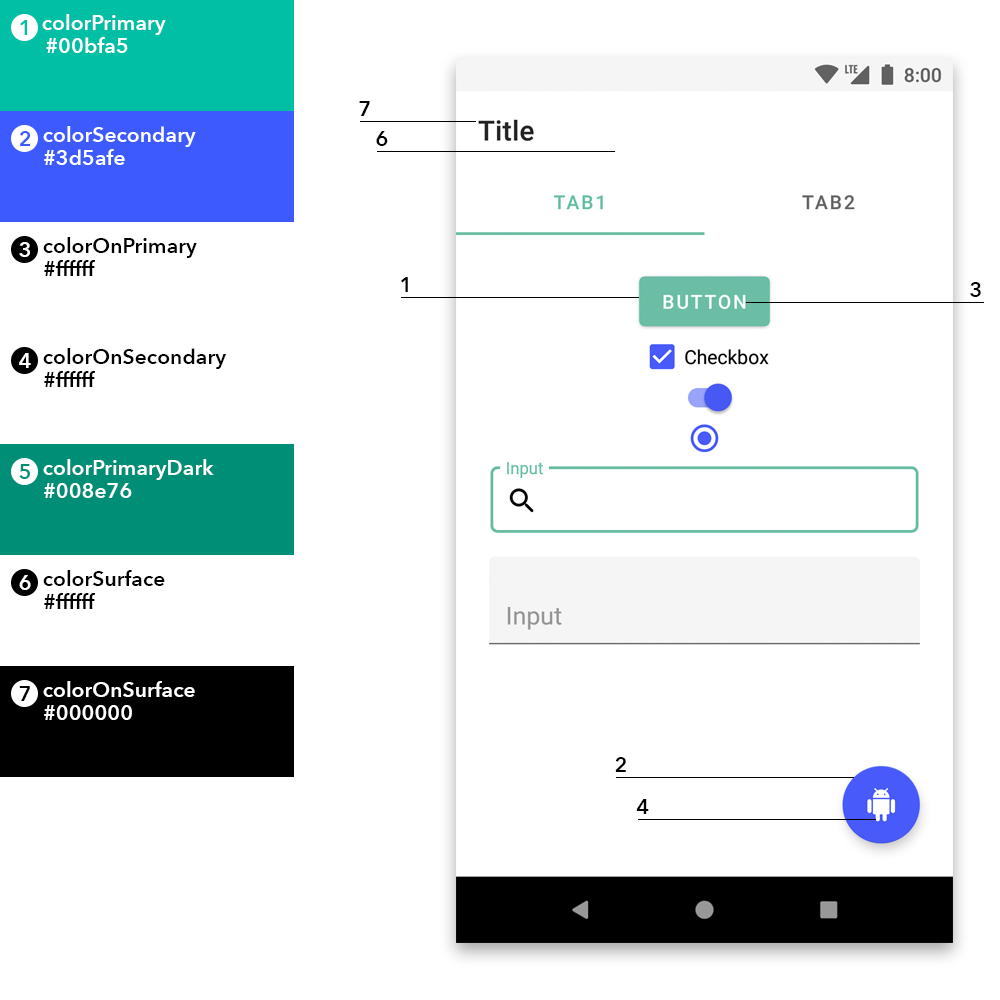
<style>
.page{position:relative;width:1000px;height:1000px;background:#ffffff}
.page>*{position:absolute;margin:0}
.t1{font:21.2px "AvenirNext-DemiBold";color:#ffffff}
.t2{font:21.2px "AvenirNext-DemiBold";color:#00bfa5}
.t3{font:21.2px "AvenirNext-DemiBold";color:#000000}
.t4{font:21.2px "AvenirNext-DemiBold";color:#3d5afe}
.t5{font:21.2px "AvenirNext-DemiBold";color:#008e76}
</style>
<div class="page">
<p class="t1" style="left:42px;top:14px;width:124px;height:21px">colorPrimary</p>
<p class="t2" style="left:20px;top:20px;width:8px;height:15px">1</p>
<p class="t1" style="left:46px;top:37px;width:82px;height:16px">#00bfa5</p>
<p class="t3" style="left:359px;top:101px;width:11px;height:15px">7</p>
<p class="t1" style="left:43px;top:126px;width:153px;height:21px">colorSecondary</p>
<p class="t4" style="left:20px;top:131px;width:11px;height:15px">2</p>
<p class="t3" style="left:376px;top:131px;width:12px;height:15px">6</p>
<p class="t1" style="left:44px;top:149px;width:81px;height:16px">#3d5afe</p>
<p class="t1" style="left:19px;top:242px;width:11px;height:15px">3</p>
<p class="t3" style="left:43px;top:237px;width:154px;height:21px">colorOnPrimary</p>
<p class="t3" style="left:44px;top:260px;width:51px;height:16px">#ffffff</p>
<p class="t3" style="left:400px;top:277px;width:8px;height:15px">1</p>
<p class="t3" style="left:970px;top:282px;width:11px;height:15px">3</p>
<p class="t1" style="left:19px;top:353px;width:12px;height:15px">4</p>
<p class="t3" style="left:43px;top:348px;width:183px;height:21px">colorOnSecondary</p>
<p class="t3" style="left:44px;top:371px;width:51px;height:16px">#ffffff</p>
<p class="t1" style="left:43px;top:459px;width:171px;height:21px">colorPrimaryDark</p>
<p class="t5" style="left:19px;top:464px;width:11px;height:15px">5</p>
<p class="t1" style="left:44px;top:483px;width:88px;height:15px">#008e76</p>
<p class="t1" style="left:19px;top:575px;width:12px;height:15px">6</p>
<p class="t3" style="left:43px;top:570px;width:122px;height:16px">colorSurface</p>
<p class="t3" style="left:44px;top:593px;width:51px;height:16px">#ffffff</p>
<p class="t3" style="left:19px;top:686px;width:11px;height:15px">7</p>
<p class="t1" style="left:43px;top:681px;width:152px;height:16px">colorOnSurface</p>
<p class="t1" style="left:44px;top:705px;width:88px;height:15px">#000000</p>
<p class="t3" style="left:615px;top:757px;width:11px;height:15px">2</p>
<p class="t3" style="left:636px;top:799px;width:13px;height:15px">4</p>
</div>
